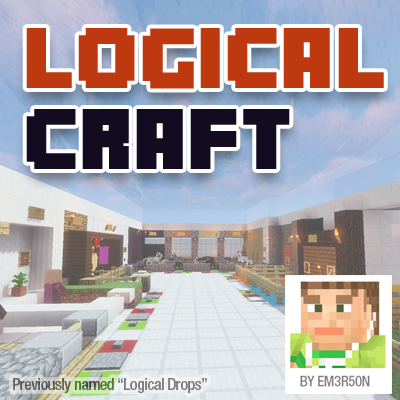
<style>
.page{position:relative;width:400px;height:400px}
.page>*{position:absolute;margin:0}
.t1{font:76.4px "Minecrafter";letter-spacing:0.03em;color:#be3810}
.t2{font:76.4px "Minecrafter";letter-spacing:0.03em;color:#130c20}
.t3{font:16.2px "HelveticaNeue-MediumCond";letter-spacing:-0.033em}
</style>
<div class="page">
<p class="t1" style="left:26px;top:28px;width:358px;height:61px">LOGICAL</p>
<p class="t2" style="left:26px;top:109px;width:264px;height:60px">CRAFT</p>
<p class="t3" style="left:13px;top:378px;width:194px;height:15px">Previously named “Logical Drops”</p>
</div>
